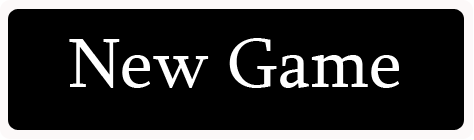
<style>
.page{position:relative;width:474px;height:140px;background:#000000}
.page>*{position:absolute;margin:0}
.t1{font:72px "Sylfaen";color:#ffffff}
</style>
<div class="page">
<p class="t1" style="left:69px;top:38px;width:330px;height:50px">New Game</p>
</div>
